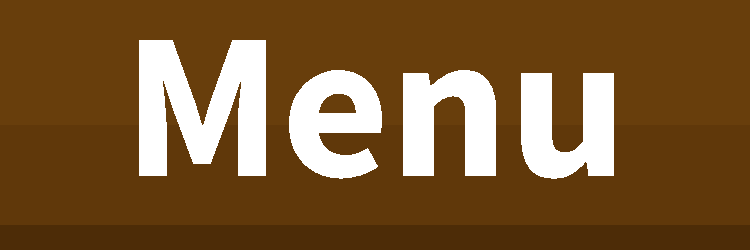
<style>
.page{position:relative;width:750px;height:250px;background:#683e0c}
.page>*{position:absolute;margin:0}
.t1{font:208.3px "Calibri-Bold";color:#ffffff}
</style>
<div class="page">
<p class="t1" style="left:138px;top:40px;width:476px;height:139px">Menu</p>
</div>
